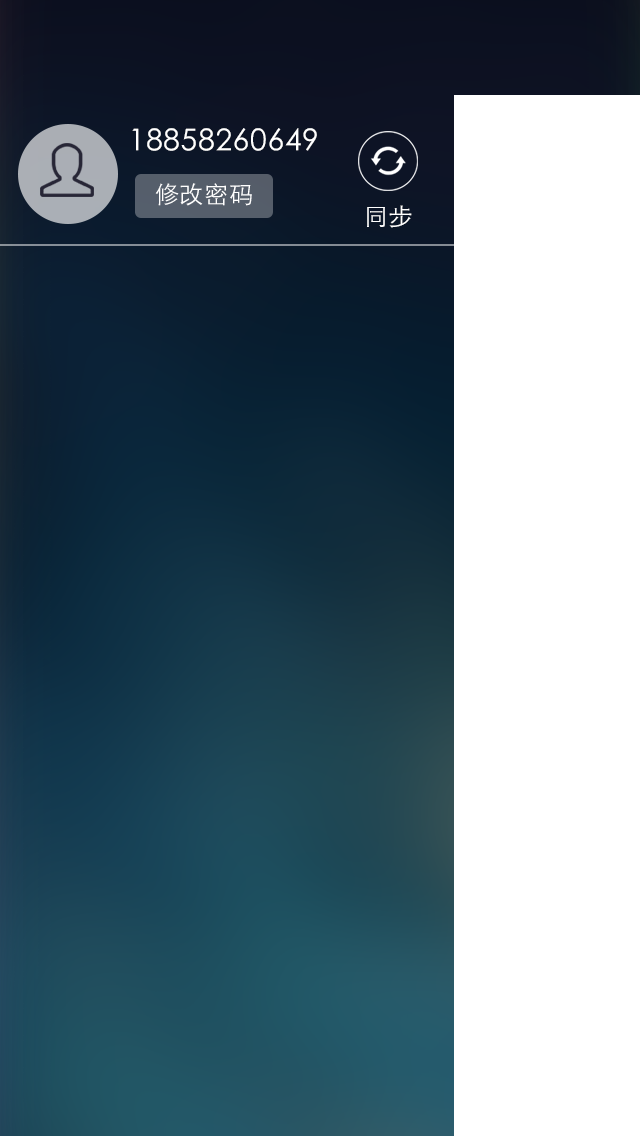
<style>
.page{position:relative;width:640px;height:1136px;background:#ffffff}
.page>*{position:absolute;margin:0}
.t1{font:30px "STHeitiSC-Light";letter-spacing:0.025em;color:#ffffff}
.t2{font:24px "STHeitiSC-Light";letter-spacing:0.025em;color:#ffffff}
</style>
<div class="page">
<p class="t1" style="left:132px;top:128px;width:185px;height:23px">18858260649</p>
<p class="t2" style="left:155px;top:183px;width:97px;height:23px">修改密码</p>
<p class="t2" style="left:367px;top:205px;width:45px;height:23px">同步</p>
</div>
